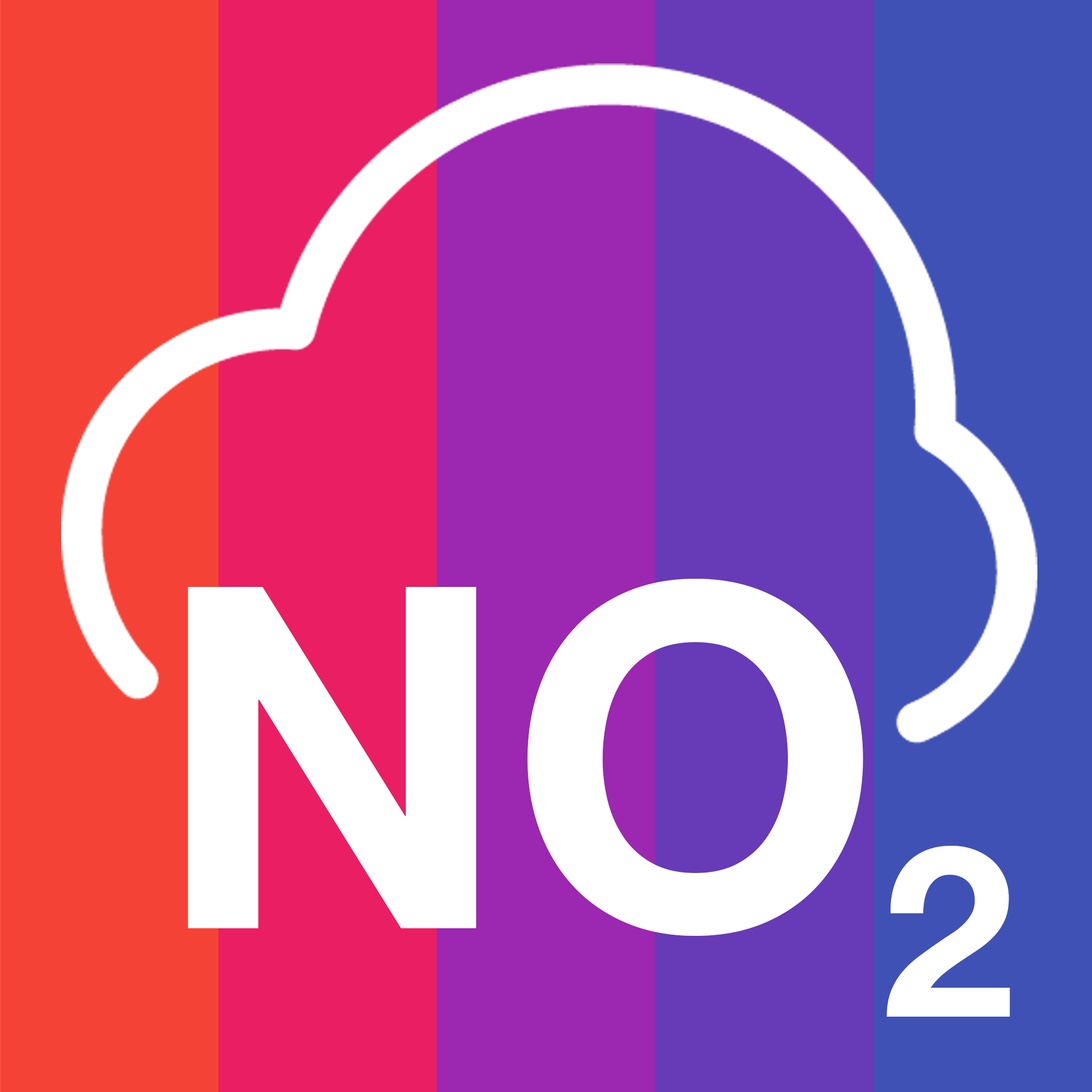
<style>
.page{position:relative;width:1092px;height:1092px}
.page>*{position:absolute;margin:0}
.t1{font:477.7px "HelveticaNeue-Bold";letter-spacing:0.001em;color:#ffffff}
.t2{font:238.9px "HelveticaNeue-Bold";letter-spacing:0.001em;color:#ffffff}
</style>
<div class="page">
<p class="t1" style="left:188px;top:579px;width:675px;height:357px">NO</p>
<p class="t2" style="left:887px;top:846px;width:123px;height:171px">2</p>
</div>
